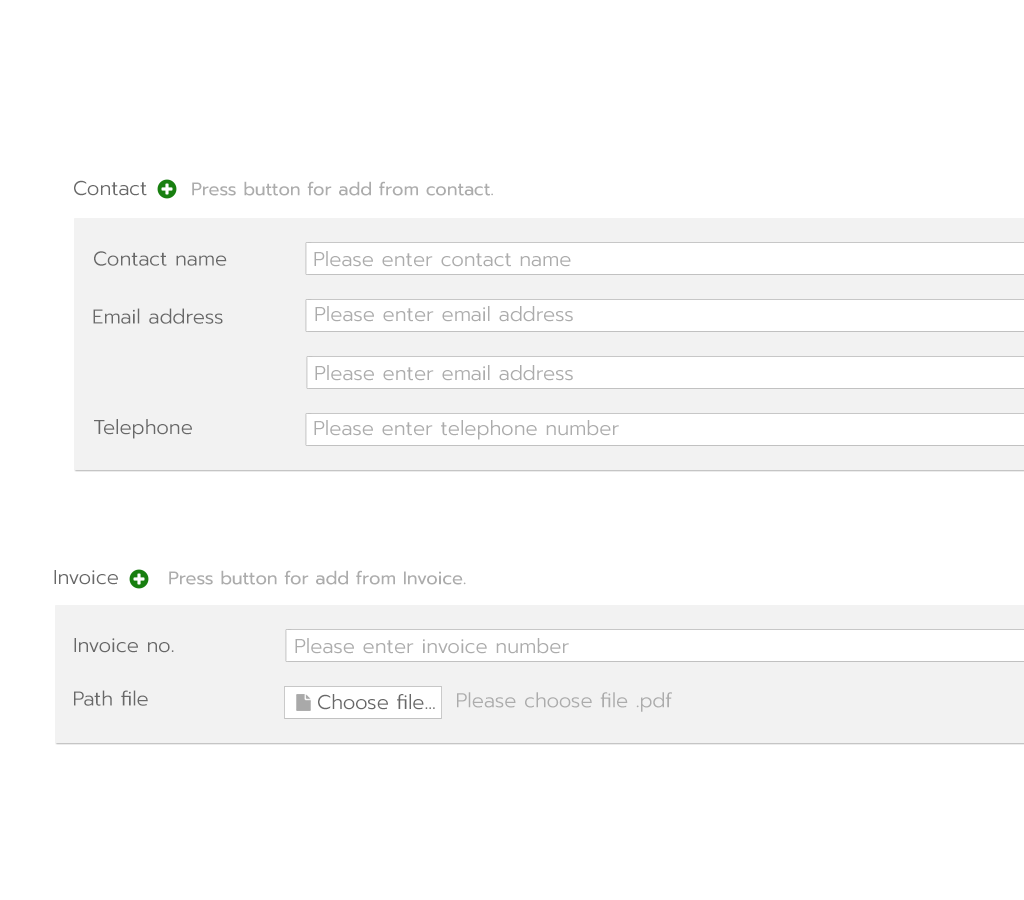
<style>
.page{position:relative;width:1024px;height:900px;background:#ffffff}
.page>*{position:absolute;margin:0}
.t1{font:20px "Prompt-Light";color:#686868}
.t2{font:18px "Prompt-Regular";color:#acacac}
.t3{font:20px "Prompt-Light";color:#acacac}
</style>
<div class="page">
<p class="t1" style="left:74px;top:180px;width:73px;height:16px">Contact</p>
<p class="t2" style="left:192px;top:181px;width:301px;height:15px">Press button for add from contact.</p>
<p class="t1" style="left:94px;top:251px;width:133px;height:15px">Contact name</p>
<p class="t3" style="left:314px;top:251px;width:257px;height:16px">Please enter contact name</p>
<p class="t1" style="left:93px;top:308px;width:130px;height:16px">Email address</p>
<p class="t3" style="left:315px;top:306px;width:258px;height:16px">Please enter email address</p>
<p class="t3" style="left:315px;top:365px;width:258px;height:16px">Please enter email address</p>
<p class="t1" style="left:94px;top:419px;width:98px;height:20px">Telephone</p>
<p class="t3" style="left:314px;top:420px;width:305px;height:20px">Please enter telephone number</p>
<p class="t1" style="left:54px;top:570px;width:64px;height:15px">Invoice</p>
<p class="t2" style="left:169px;top:570px;width:297px;height:15px">Press button for add from Invoice.</p>
<p class="t1" style="left:74px;top:638px;width:100px;height:15px">Invoice no.</p>
<p class="t3" style="left:295px;top:638px;width:274px;height:16px">Please enter invoice number</p>
<p class="t1" style="left:74px;top:690px;width:74px;height:16px">Path file</p>
<p class="t1" style="left:318px;top:694px;width:117px;height:16px">Choose file...</p>
<p class="t3" style="left:457px;top:692px;width:215px;height:20px">Please choose file .pdf</p>
</div>
